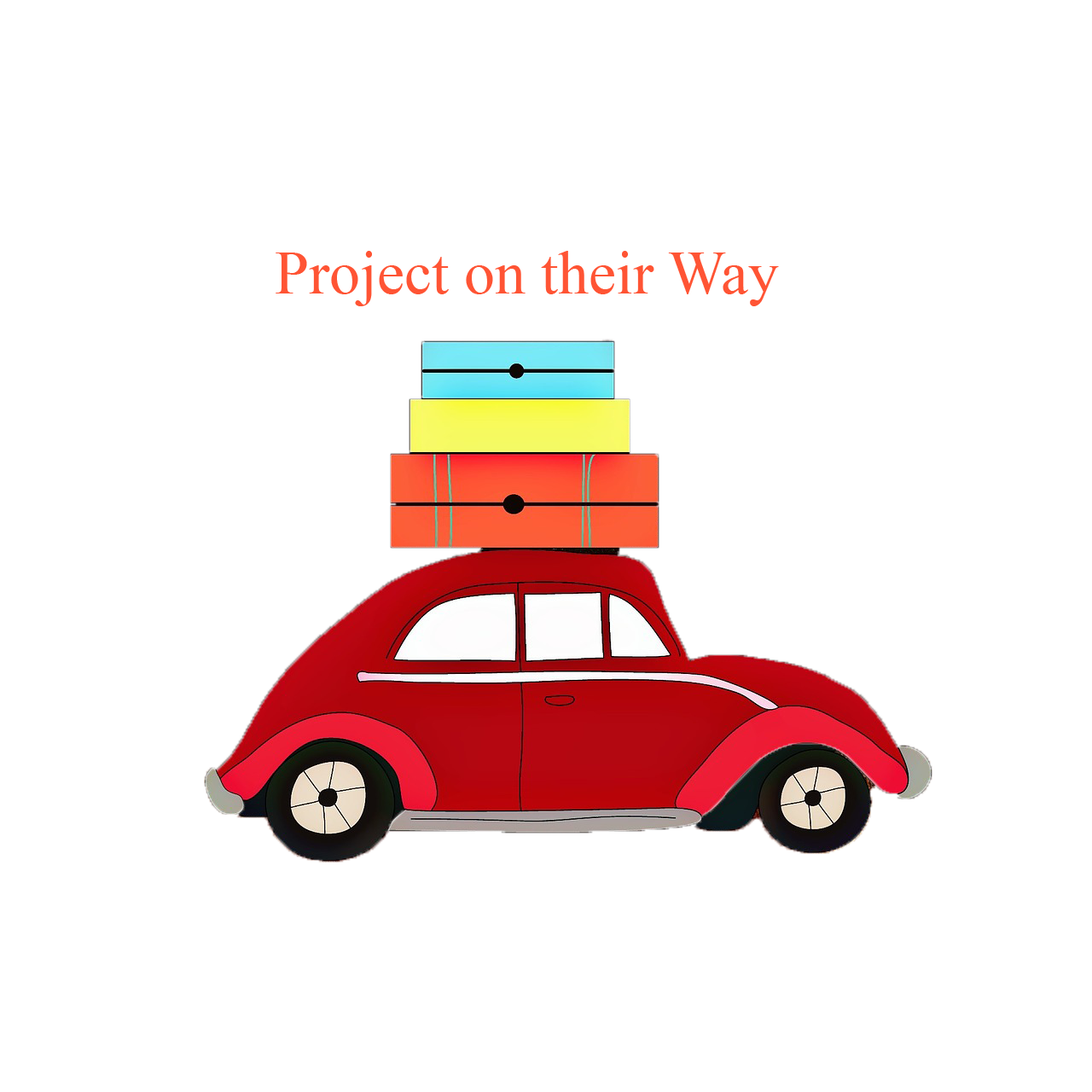
<style>
.page{position:relative;width:1092px;height:1092px;background:#ffffff}
.page>*{position:absolute;margin:0}
.t1{font:61.4px "TimesNewRomanPSMT";color:#ff5434}
</style>
<div class="page">
<p class="t1" style="left:276px;top:251px;width:503px;height:55px">Project on their Way</p>
</div>
